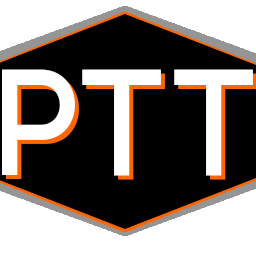
<style>
.page{position:relative;width:256px;height:256px;background:#000000}
.page>*{position:absolute;margin:0}
.t1{font:150px "Code-Bold";letter-spacing:0.05em;color:#ffffff}
</style>
<div class="page">
<p class="t1" style="left:2px;top:69px;width:251px;height:107px">PTT</p>
<p class="t1" style="left:6px;top:73px;width:251px;height:107px">PTT</p>
</div>
